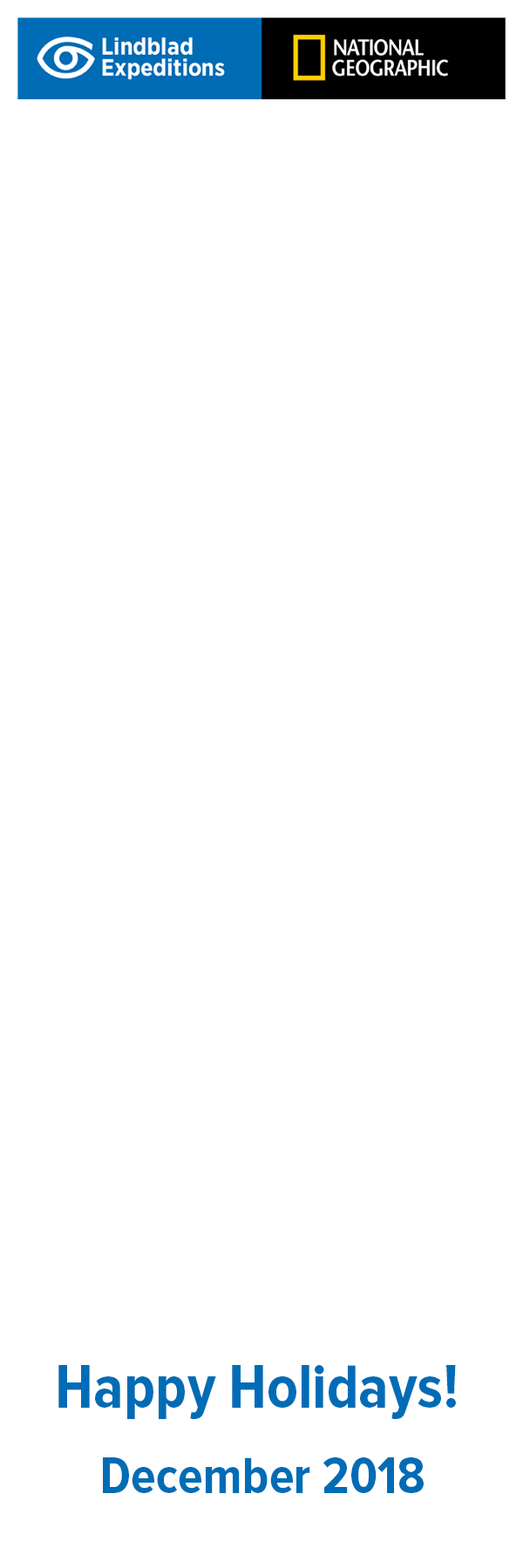
<style>
.page{position:relative;width:523px;height:1568px;background:#ffffff}
.page>*{position:absolute;margin:0}
.t1{font:62.7px "ProximaNovaCond-Bold";color:#006cb6}
.t2{font:52.3px "ProximaNovaCond-Bold";color:#006cb6}
</style>
<div class="page">
<p class="t1" style="left:58px;top:1365px;width:398px;height:54px">Happy Holidays!</p>
<p class="t2" style="left:103px;top:1457px;width:320px;height:36px">December 2018</p>
</div>
